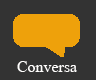
<style>
.page{position:relative;width:96px;height:80px;background:#333333}
.page>*{position:absolute;margin:0}
.t1{font:24px "AngsanaUPC";color:#fffefd}
</style>
<div class="page">
<p class="t1" style="left:17px;top:61px;width:60px;height:11px">Conversa</p>
</div>
